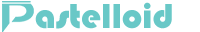
<style>
.page{position:relative;width:200px;height:32px;background:#ffffff}
.page>*{position:absolute;margin:0}
.t1{font:36px "Bauhaus93";color:#69c8c7}
</style>
<div class="page">
<p class="t1" style="left:35px;top:2px;width:137px;height:27px">astelloid</p>
</div>
